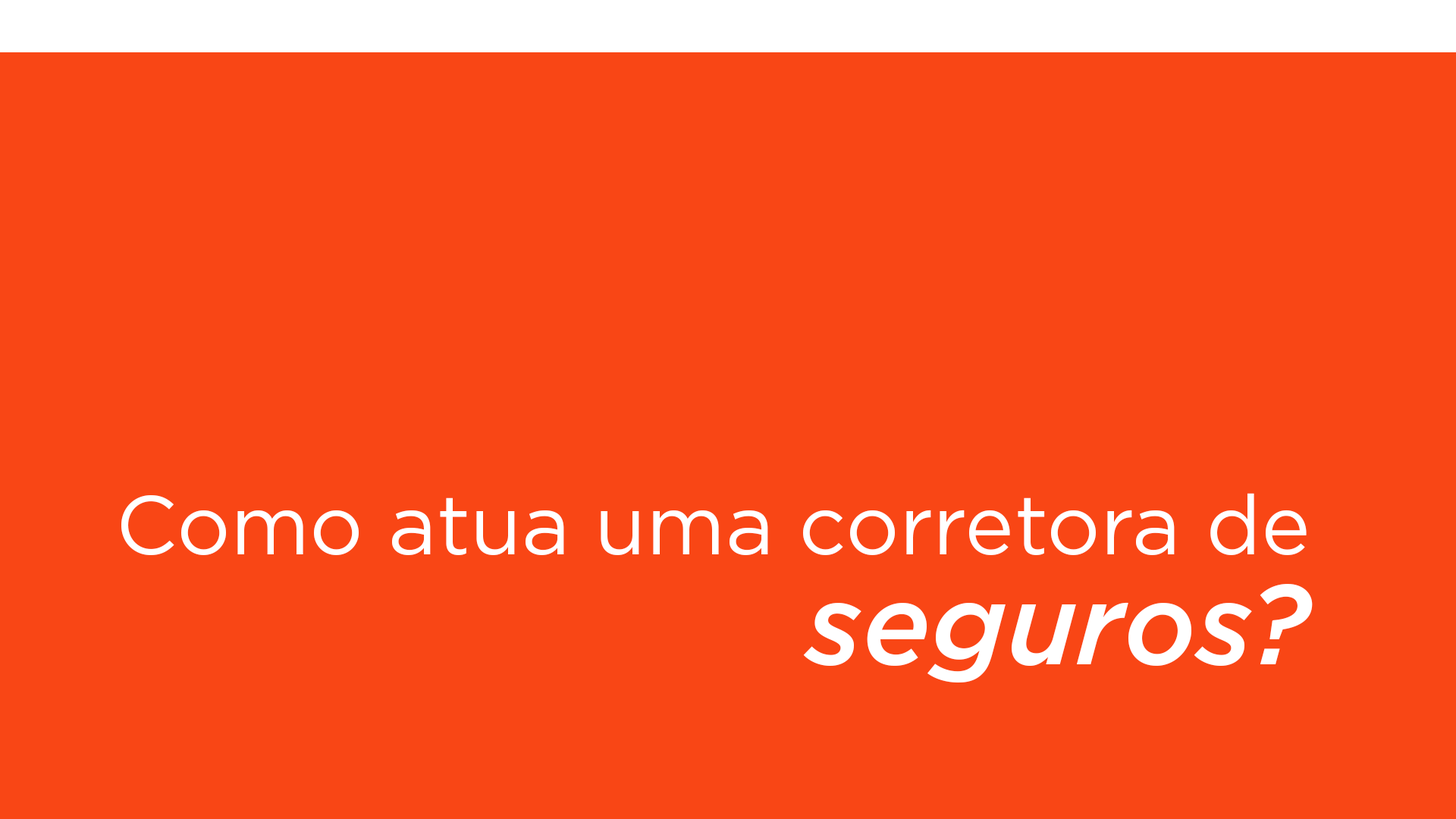
<style>
.page{position:relative;width:1456px;height:819px;background:#f94615}
.page>*{position:absolute;margin:0}
.t1{font:83.4px/110px "Gotham-Book";color:#ffffff}
.t2{font:113.7px/110px "Gotham-MediumItalic";color:#ffffff}
</style>
<div class="page">
<p class="t1" style="left:121px;top:493px;width:1192px;height:189px;text-align:right">Como atua uma corretora de<br><span class="t2">seguros?</span></p>
</div>
